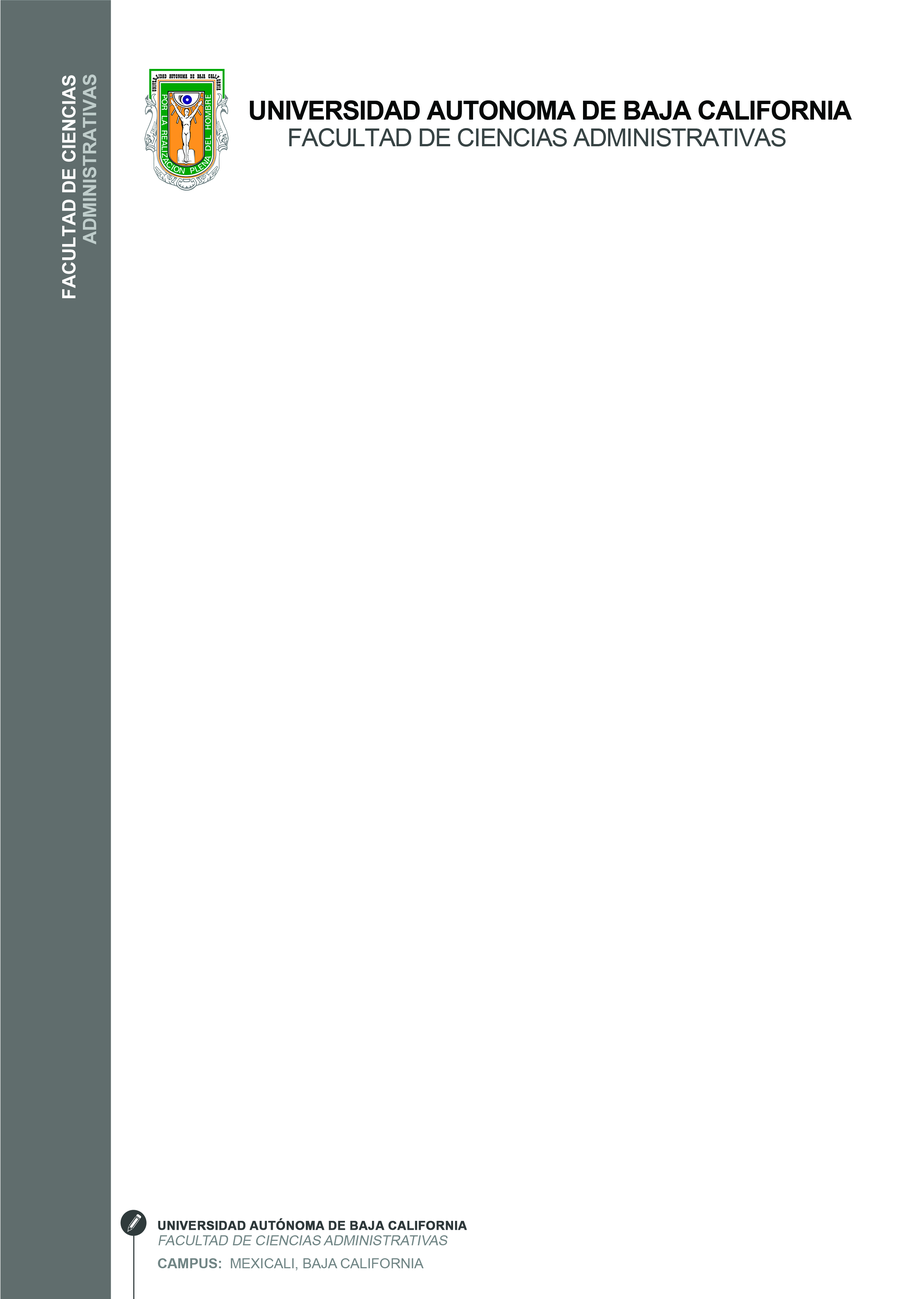
<style>
.page{position:relative;width:918px;height:1299px;background:#ffffff}
.page>*{position:absolute;margin:0}
.t1{font:18.5px "Arial-BoldMT";color:#ffffff;text-transform:uppercase}
.t2{font:18.5px "Arial-BoldMT";color:#bfcdcb;text-transform:uppercase}
.t3{font:26.2px "Arial-BoldMT";letter-spacing:-0.03em;color:#060808}
.t4{font:30.9px "Arial-BoldMT";letter-spacing:-0.03em;color:#97aaa9}
.t5{font:24.7px "ArialMT";letter-spacing:-0.03em;color:#384345}
.t6{font:21.6px "ArialMT";letter-spacing:-0.03em;color:#78ff13}
.t7{font:12.3px/27.3px "Arial-BoldMT";color:#2e383a;font-weight:bold}
.t8{font:13.9px/15.4px "ArialMT";color:#718585;font-style:italic}
.t9{font:13.9px/23.1px "Arial-BoldMT";color:#718585}
.t10{font:13.9px/23.1px "ArialMT";color:#718585}
</style>
<div class="page">
<p class="t1" style="left:62px;top:75px;width:14px;height:223px;rotate:-90deg">FACULTAD DE CIENCIAS</p>
<p class="t2" style="left:83px;top:74px;width:14px;height:170px;rotate:-90deg">ADMINISTRATIVAS</p>
<p class="t3" style="left:250px;top:100px;width:602px;height:20px"><span class="t4"> </span>UNIVERSIDAD AUTONOMA DE BAJA CALIFORNIA</p>
<p class="t5" style="left:289px;top:128px;width:497px;height:19px"><span class="t6">  </span>FACULTAD DE CIENCIAS ADMINISTRATIVAS</p>
<p class="t7" style="left:158px;top:1218px;width:309px;height:52px">UNIVERSIDAD AUTÓNOMA DE BAJA CALIFORNIA<br><span class="t8">FACULTAD DE CIENCIAS ADMINISTRATIVAS<br></span><span class="t9">CAMPUS:</span><span class="t10">  MEXICALI, BAJA CALIFORNIA</span></p>
</div>
